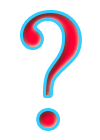
<style>
.page{position:relative;width:100px;height:140px;background:#ffffff}
.page>*{position:absolute;margin:0}
.t1{font:152px "CenturySchoolbook"}
</style>
<div class="page">
<p class="t1" style="left:23px;top:13px;width:56px;height:115px">?</p>
</div>
